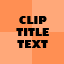
<style>
.page{position:relative;width:64px;height:64px;background:#ffa879}
.page>*{position:absolute;margin:0}
.t1{font:10px "GillSans-UltraBold";color:#000000}
</style>
<div class="page">
<p class="t1" style="left:16px;top:16px;width:33px;height:32px;text-align:center">CLIP<br>TITLE<br>TEXT</p>
</div>
